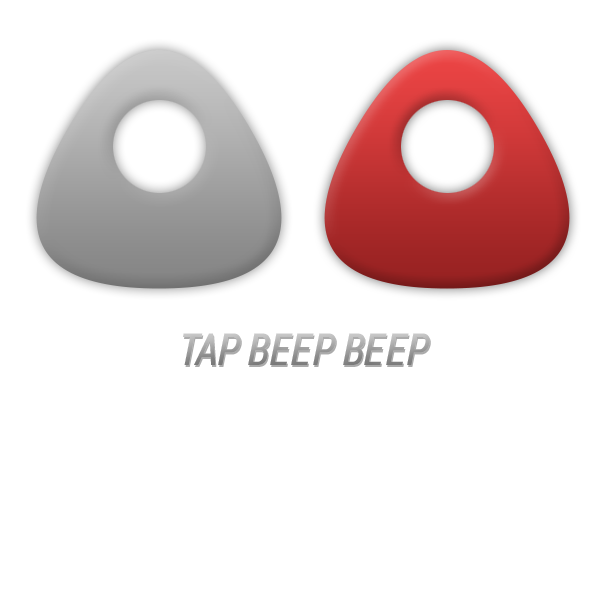
<style>
.page{position:relative;width:600px;height:600px;background:#ffffff}
.page>*{position:absolute;margin:0}
.t1{font:44.3px "RobotoCondensed-Italic";text-transform:uppercase}
</style>
<div class="page">
<p class="t1" style="left:183px;top:333px;width:247px;height:32px">Tap Beep Beep</p>
</div>
